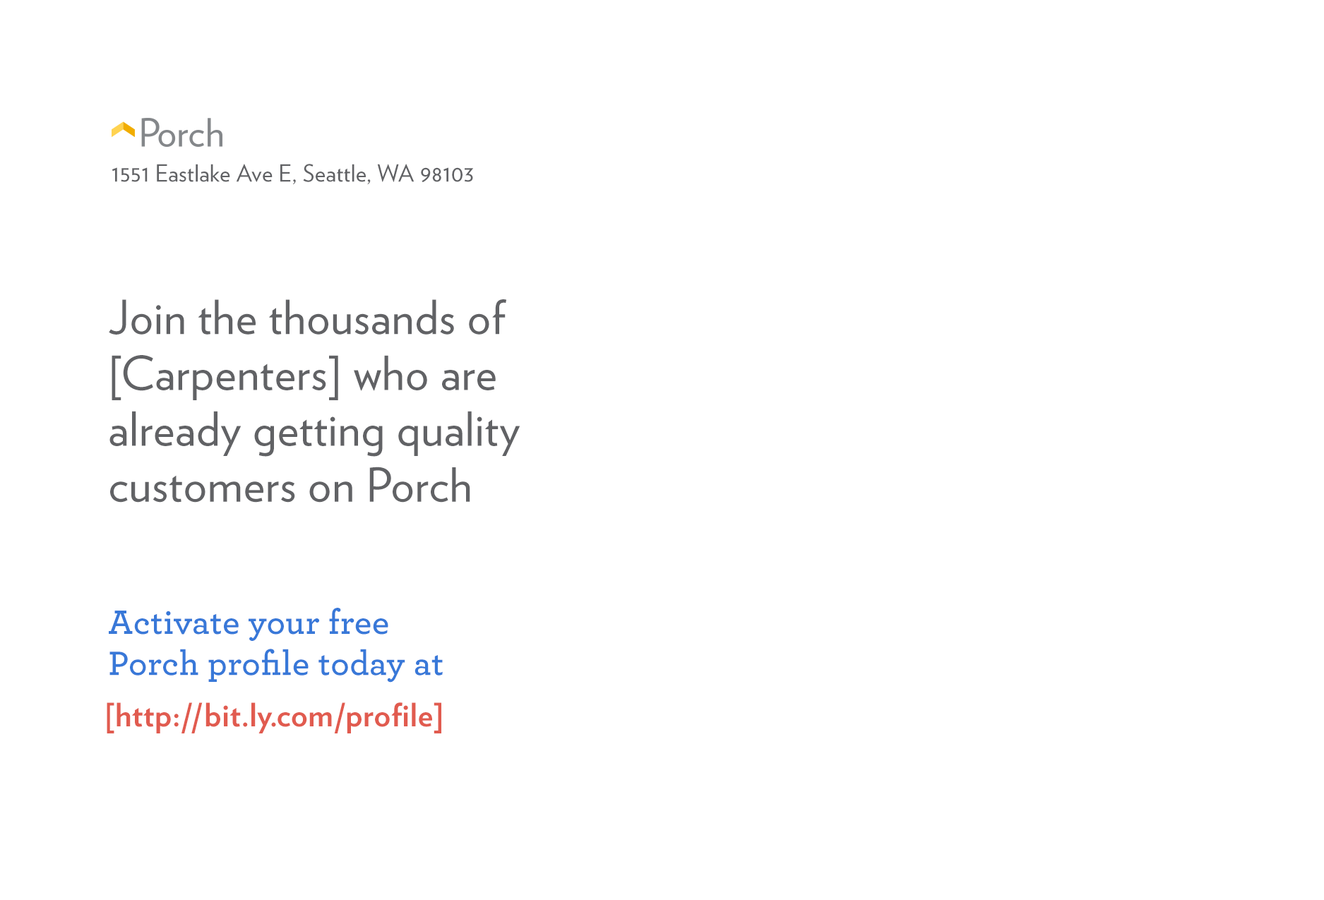
<style>
.page{position:relative;width:1324px;height:900px;background:#ffffff}
.page>*{position:absolute;margin:0}
.t1{font:23.5px "Verlag-Book";letter-spacing:0.01em;color:#616265}
.t2{font:47.1px/55.9px "Verlag-Book";letter-spacing:0.01em;color:#616265}
.t3{font:35.3px/41.2px "Archer-Semibold";letter-spacing:0.01em;color:#3878d8}
.t4{font:32.4px "Verlag-Bold";letter-spacing:0.01em;color:#e15b4f}
</style>
<div class="page">
<p class="t1" style="left:112px;top:164px;width:361px;height:21px">1551 Eastlake Ave E, Seattle, WA 98103</p>
<p class="t2" style="left:109px;top:299px;width:412px;height:204px">Join the thousands of [Carpenters] who are already getting quality customers on Porch</p>
<p class="t3" style="left:109px;top:608px;width:334px;height:75px">Activate your free<br>Porch profile today at</p>
<p class="t4" style="left:107px;top:703px;width:334px;height:31px">[http://bit.ly.com/profile]</p>
</div>
